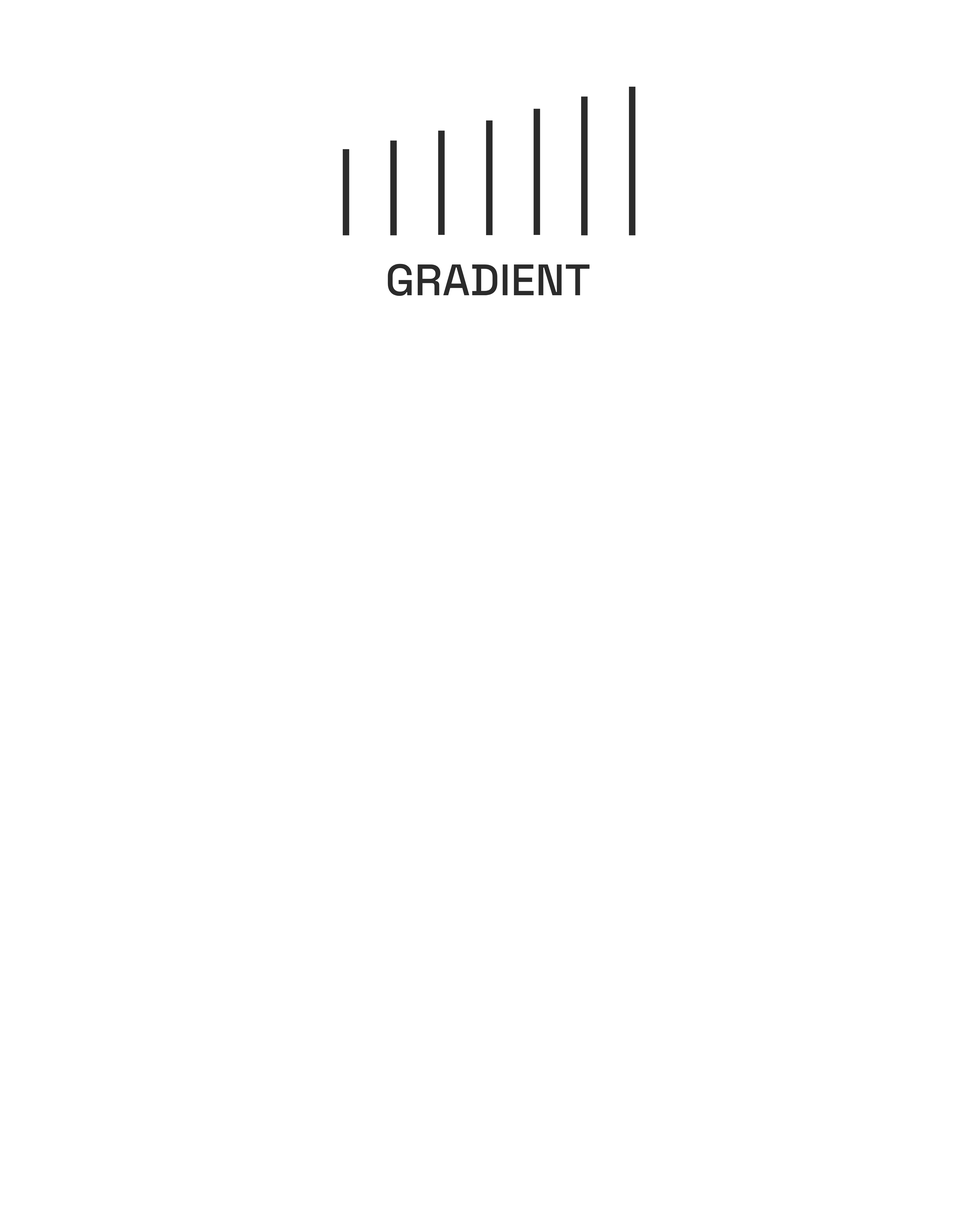
<style>
.page{position:relative;width:977px;height:1221px;background:#ffffff}
.page>*{position:absolute;margin:0}
.t1{font:44px "SpaceGroteskLight-Medium";color:#2b2b2b}
</style>
<div class="page">
<p class="t1" style="left:388px;top:264px;width:201px;height:32px">GRADIENT</p>
</div>
